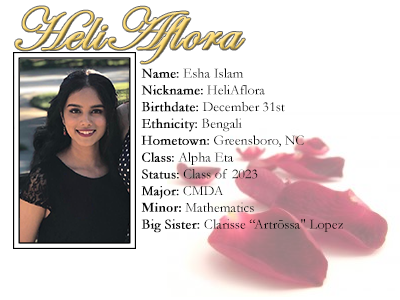
<style>
.page{position:relative;width:400px;height:300px;background:#ffffff}
.page>*{position:absolute;margin:0}
.t1{font:60px "EdwardianScriptITC";font-weight:bold}
.t2{font:14px "Garamond";color:#000000}
.t3{font:14px "Garamond";color:#000000;font-weight:bold}
.t4{font:14px "Garamond-Bold";color:#000000}
</style>
<div class="page">
<p class="t1" style="left:15px;top:6px;width:230px;height:58px">HeliAflora</p>
<p class="t2" style="left:141px;top:68px;width:202px;height:165px"><span class="t3">Name:</span> Esha Islam<br><span class="t3">Nickname:</span> HeliAflora<br><span class="t3">Birthdate:</span> December 31st<br><span class="t3">Ethnicity:</span> Bengali<br><span class="t3">Hometown:</span> Greensboro, NC<br><span class="t3">Class:</span> Alpha Eta<br><span class="t3">Status:</span> Class of 2023<br><span class="t3">Major:</span> CMDA<br><span class="t4">Minor:</span> Mathematics<br><span class="t3">Big Sister: </span>Clarisse “Artrōssa" Lopez</p>
</div>
